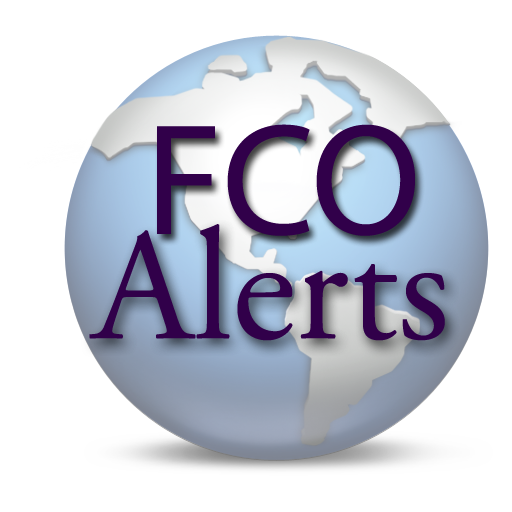
<style>
.page{position:relative;width:512px;height:512px;background:#ffffff}
.page>*{position:absolute;margin:0}
.t1{font:159.4px "MyriadPro-Regular";color:#31004a}
.t2{font:159.4px "AGaramondPro-Regular";color:#31004a}
</style>
<div class="page">
<p class="t1" style="left:157px;top:124px;width:258px;height:112px">FCO</p>
<p class="t2" style="left:89px;top:224px;width:356px;height:117px">Alerts</p>
</div>
